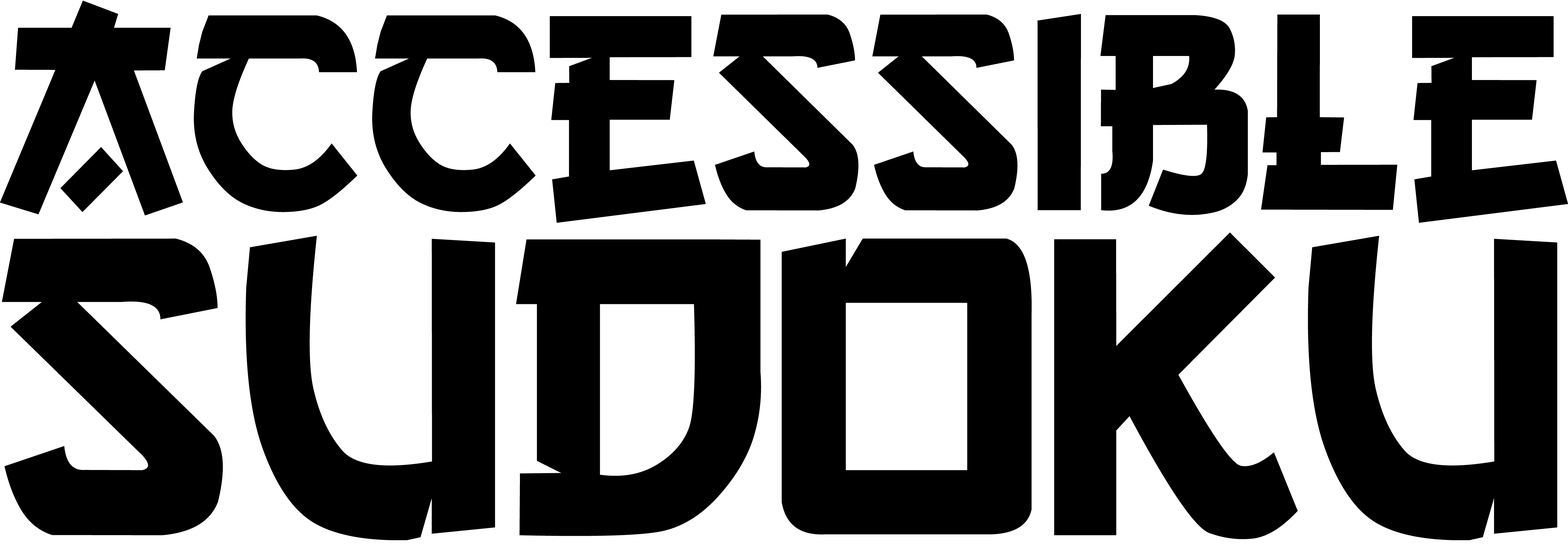
<style>
.page{position:relative;width:1568px;height:544px;background:#000000}
.page>*{position:absolute;margin:0}
.t1{font:293.9px "GangofThree";color:#000000}
.t2{font:445px "GangofThree";color:#000000}
</style>
<div class="page">
<p class="t1" style="left:0px;top:0px;width:1568px;height:223px">Accessible</p>
<p class="t2" style="left:2px;top:232px;width:1555px;height:308px">sudoku</p>
</div>
